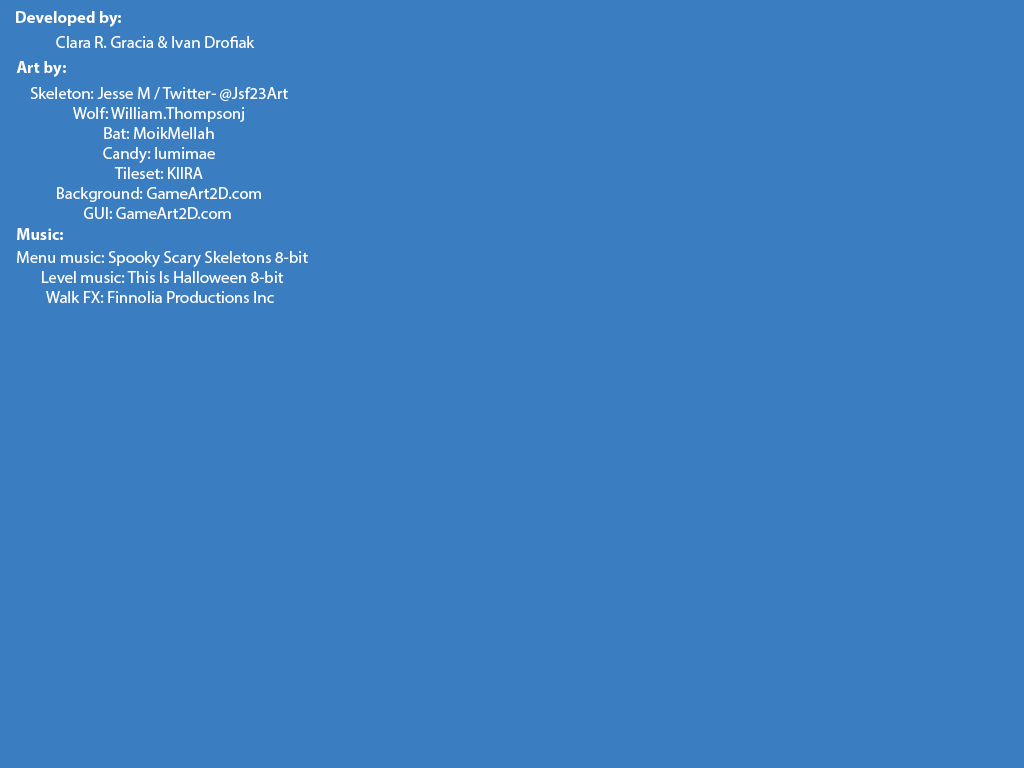
<style>
.page{position:relative;width:1024px;height:768px;background:#3b7dc1}
.page>*{position:absolute;margin:0}
.t1{font:16.7px "MyriadPro-Bold";color:#ffffff}
.t2{font:16.7px "MyriadPro-Regular";color:#ffffff}
</style>
<div class="page">
<p class="t1" style="left:16px;top:11px;width:105px;height:16px">Developed by:</p>
<p class="t2" style="left:56px;top:36px;width:199px;height:12px">Clara R. Gracia &amp; Ivan Drofiak</p>
<p class="t1" style="left:16px;top:61px;width:50px;height:16px">Art by:</p>
<p class="t2" style="left:30px;top:87px;width:258px;height:132px;text-align:center">Skeleton: Jesse M / Twitter- @Jsf23Art<br>Wolf: William.Thompsonj<br>Bat: MoikMellah<br>Candy: lumimae<br>Tileset: KIIRA<br>Background: GameArt2D.com<br>GUI: GameArt2D.com</p>
<p class="t1" style="left:17px;top:228px;width:46px;height:12px">Music:</p>
<p class="t2" style="left:17px;top:251px;width:291px;height:52px;text-align:center">Menu music: Spooky Scary Skeletons 8-bit<br>Level music: This Is Halloween 8-bit<br>Walk FX: Finnolia Productions Inc</p>
</div>
